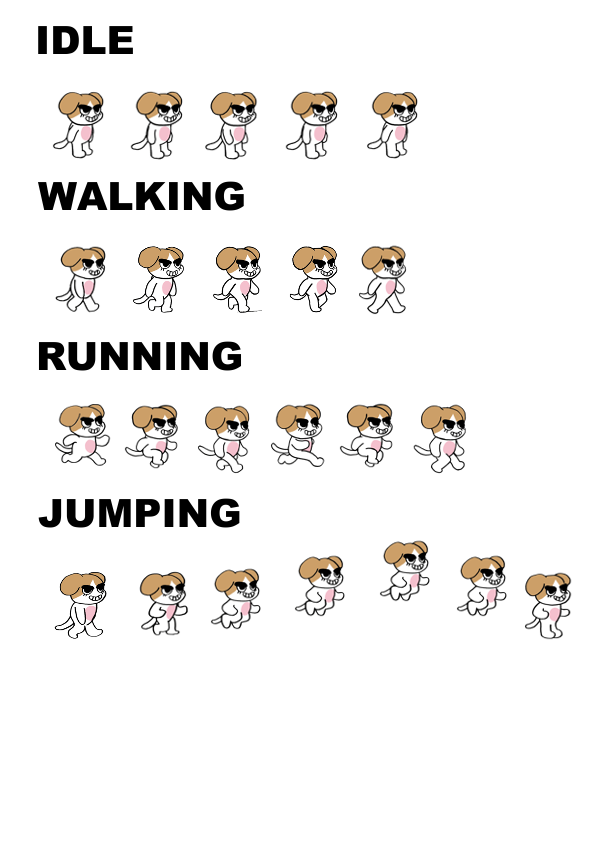
<style>
.page{position:relative;width:595px;height:842px;background:#ffffff}
.page>*{position:absolute;margin:0}
.t1{font:39px "Arial-Black";color:#000000}
</style>
<div class="page">
<p class="t1" style="left:38px;top:26px;width:95px;height:28px">IDLE</p>
<p class="t1" style="left:38px;top:181px;width:206px;height:30px">WALKING</p>
<p class="t1" style="left:38px;top:341px;width:204px;height:30px">RUNNING</p>
<p class="t1" style="left:38px;top:498px;width:202px;height:30px">JUMPING</p>
</div>
